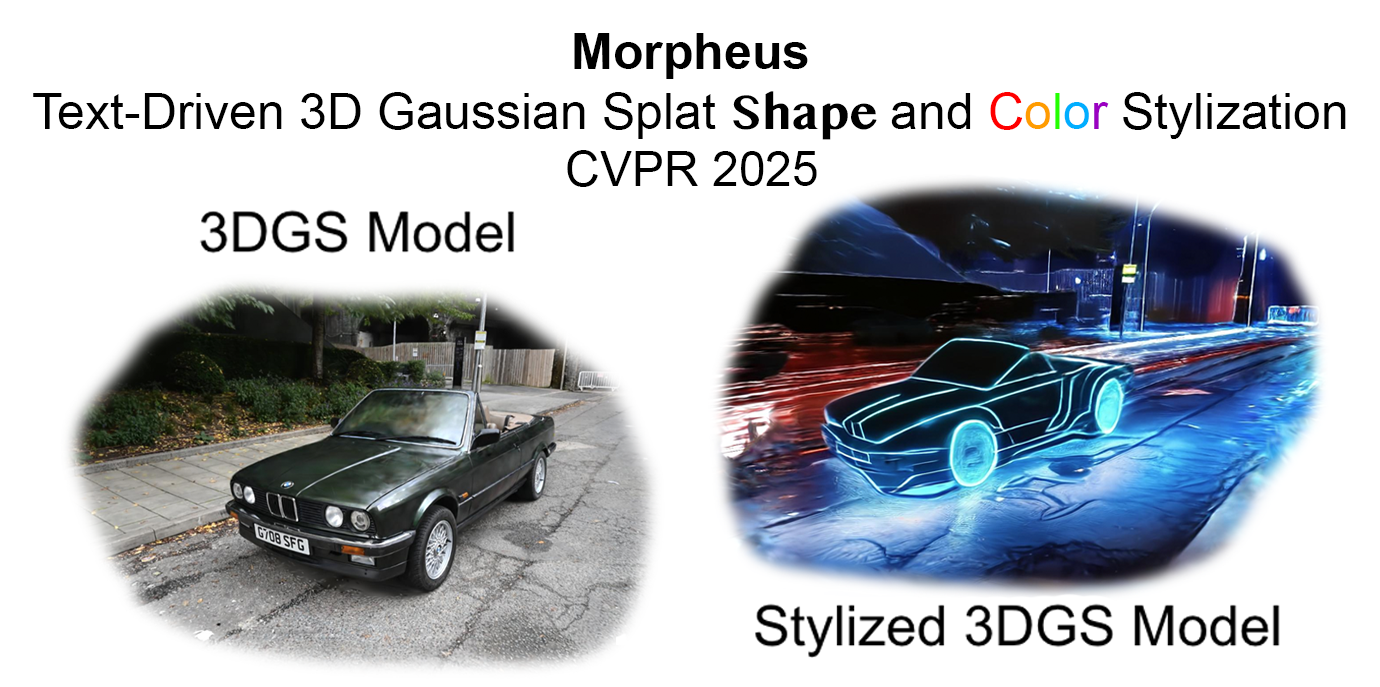
<style>
.page{position:relative;width:1380px;height:687px;background:#ffffff}
.page>*{position:absolute;margin:0}
.t1{font:50px "ArialMT";color:#000000}
.t2{font:50px "Arial-BoldMT";color:#000000}
.t3{font:50px "SinhalaMN-Bold";color:#000000}
.t4{font:50px "ArialMT";color:#ff0000}
.t5{font:50px "ArialMT";color:#ff9c00}
.t6{font:50px "ArialMT";color:#24ff00}
.t7{font:50px "ArialMT";color:#00aeff}
.t8{font:50px "ArialMT";color:#9b00c2}
.t9{font:48px "ArialMT";color:#000000}
</style>
<div class="page">
<p class="t1" style="left:33px;top:33px;width:1313px;height:154px;text-align:center"><span class="t2">Morpheus<br></span>Text-Driven 3D Gaussian Splat <span class="t3">Shape </span>and <span class="t4">C</span><span class="t5">o</span><span class="t6">l</span><span class="t7">o</span><span class="t8">r</span> Stylization<br><span class="t9">CVPR 2025</span></p>
</div>
